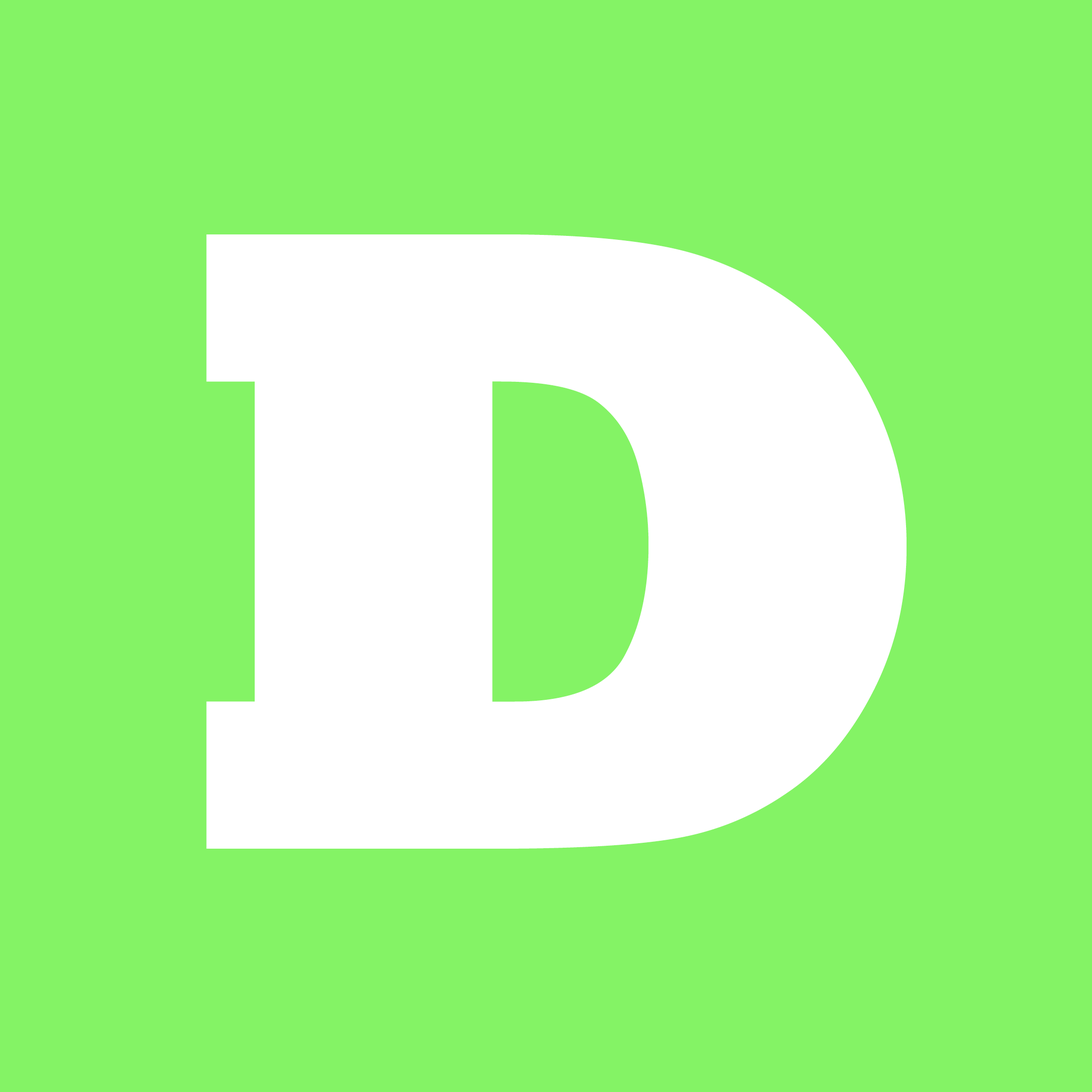
<style>
.page{position:relative;width:1092px;height:1092px;background:#84f365}
.page>*{position:absolute;margin:0}
.t1{font:904.4px "Rockwell-ExtraBold";color:#ffffff}
</style>
<div class="page">
<p class="t1" style="left:206px;top:234px;width:701px;height:615px">D</p>
</div>
